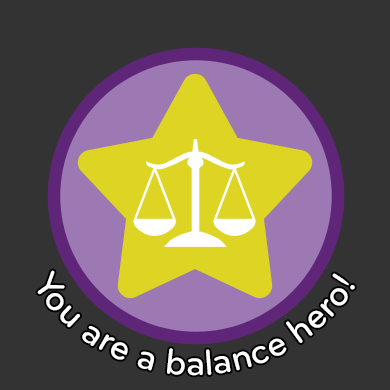
<style>
.page{position:relative;width:390px;height:390px;background:#333333}
.page>*{position:absolute;margin:0}
.t1{font:37.5px "Bryant-Medium";color:#ffffff}
</style>
<div class="page">
<p class="t1" style="left:37px;top:270px;width:318px;height:106px;text-align:center">You are a balance hero!</p>
</div>
